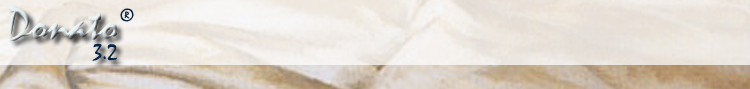
<style>
.page{position:relative;width:750px;height:89px}
.page>*{position:absolute;margin:0}
.t1{font:18px "Mistral";color:#052345}
.t2{font:24px "Mistral";color:#052345}
</style>
<div class="page">
<p class="t1" style="left:120px;top:8px;width:14px;height:14px">®</p>
<p class="t2" style="left:92px;top:43px;width:25px;height:18px">3.2</p>
</div>
